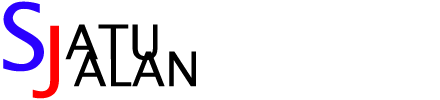
<style>
.page{position:relative;width:440px;height:100px;background:#ffffff}
.page>*{position:absolute;margin:0}
.t1{font:91.5px "LucidaSans";color:#2a00fe}
.t2{font:83.6px "LucidaSans";color:#ff0000}
.t3{font:47.8px "LucidaSans";color:#000000}
</style>
<div class="page">
<p class="t1" style="left:3px;top:1px;width:41px;height:71px">S</p>
<p class="t2" style="left:32px;top:25px;width:27px;height:74px">J</p>
<p class="t3" style="left:65px;top:24px;width:93px;height:37px">ATU</p>
<p class="t3" style="left:74px;top:51px;width:122px;height:36px">ALAN</p>
</div>
